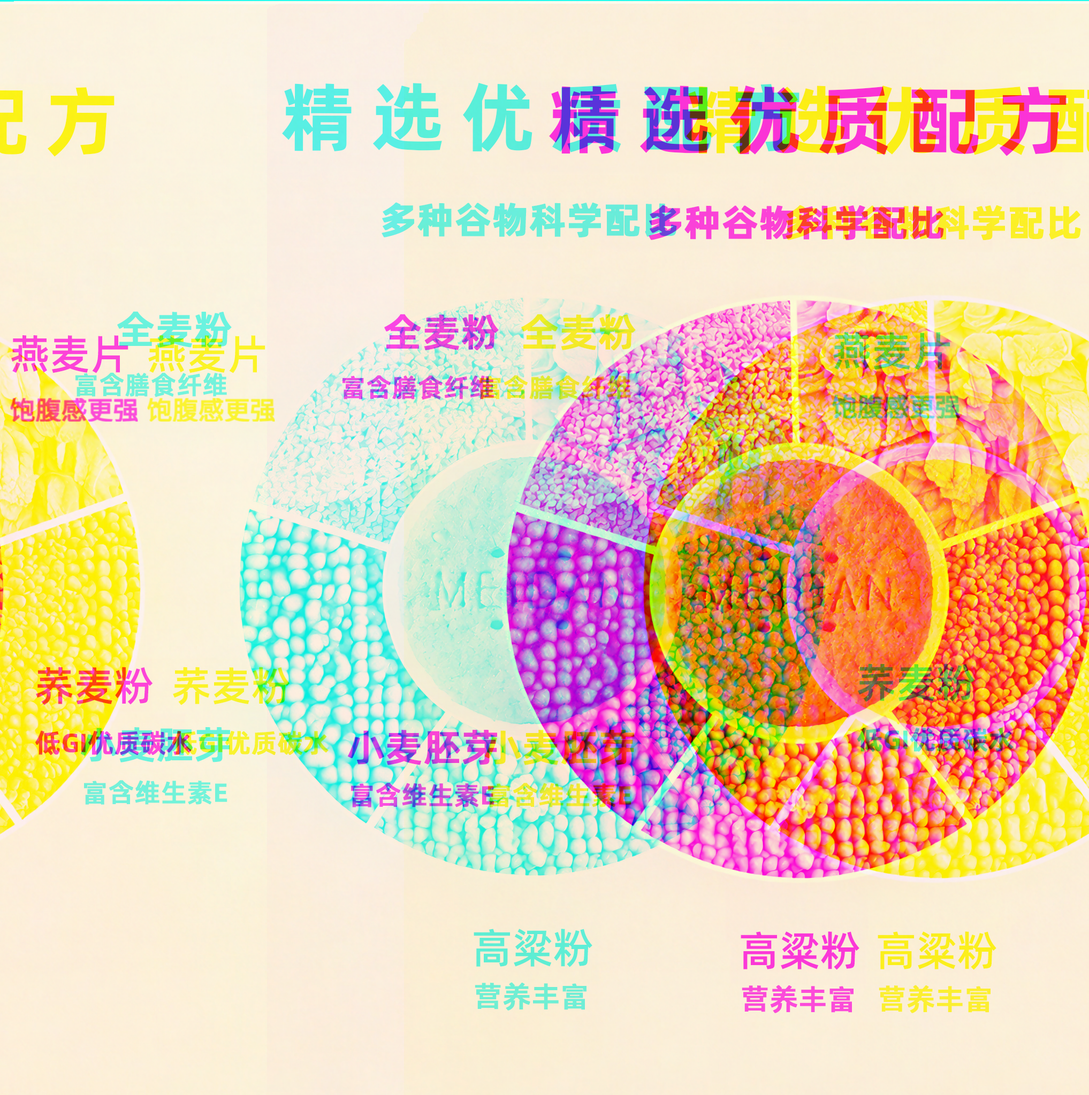
<style>
.page{position:relative;width:1089px;height:1095px}
.page>*{position:absolute;margin:0}
.t1{font:75.8px "AlibabaPuHuiTi-Bold";letter-spacing:0.2em}
.t2{font:37px "AlibabaPuHuiTi-Bold";color:#69eed9;font-weight:bold}
.t3{font:38.3px "AlibabaPuHuiTi-Medium";color:#6af2de;font-weight:bold}
.t4{font:41px "AlibabaPuHuiTi-Medium"}
.t5{font:25.4px "AlibabaPuHuiTi-Medium";color:#73f2db;font-weight:bold}
.t6{font:25.9px "AdobeHeitiStd-Regular";font-weight:bold}
.t7{font:40.6px "AlibabaPuHuiTi-Medium"}
.t8{font:37.9px "AlibabaPuHuiTi-Medium";font-weight:bold}
.t9{font:25.9px "AlibabaPuHuiTi-Medium";font-weight:bold}
.t10{font:41.5px "AlibabaPuHuiTi-Medium";color:#5eeed4}
.t11{font:28.5px "AlibabaPuHuiTi-Medium";font-weight:bold}
</style>
<div class="page">
<p class="t1" style="left:282px;top:81px;width:517px;height:71px">精选优质配方</p>
<p class="t2" style="left:381px;top:201px;width:296px;height:35px">多种谷物科学配比</p>
<p class="t3" style="left:117px;top:310px;width:115px;height:37px">全麦粉</p>
<p class="t4" style="left:833px;top:331px;width:117px;height:38px">燕麦片</p>
<p class="t5" style="left:75px;top:372px;width:152px;height:24px">富含膳食纤维</p>
<p class="t6" style="left:832px;top:394px;width:128px;height:24px">饱腹感更强</p>
<p class="t7" style="left:857px;top:663px;width:118px;height:38px">荞麦粉</p>
<p class="t8" style="left:81px;top:726px;width:149px;height:36px">小麦胚芽</p>
<p class="t9" style="left:857px;top:726px;width:156px;height:25px">低GI优质碳水</p>
<p class="t9" style="left:84px;top:779px;width:143px;height:25px">富含维生素E</p>
<p class="t10" style="left:473px;top:928px;width:119px;height:39px">高粱粉</p>
<p class="t11" style="left:474px;top:982px;width:112px;height:28px">营养丰富</p>
</div>
